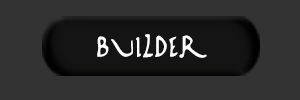
<style>
.page{position:relative;width:300px;height:100px;background:#333333}
.page>*{position:absolute;margin:0}
.t1{font:48px "Marathon";letter-spacing:0.025em;color:#ffffff;scale:0.9 1}
</style>
<div class="page">
<p class="t1" style="left:97px;top:34px;width:110px;height:24px">BUILDER</p>
</div>
